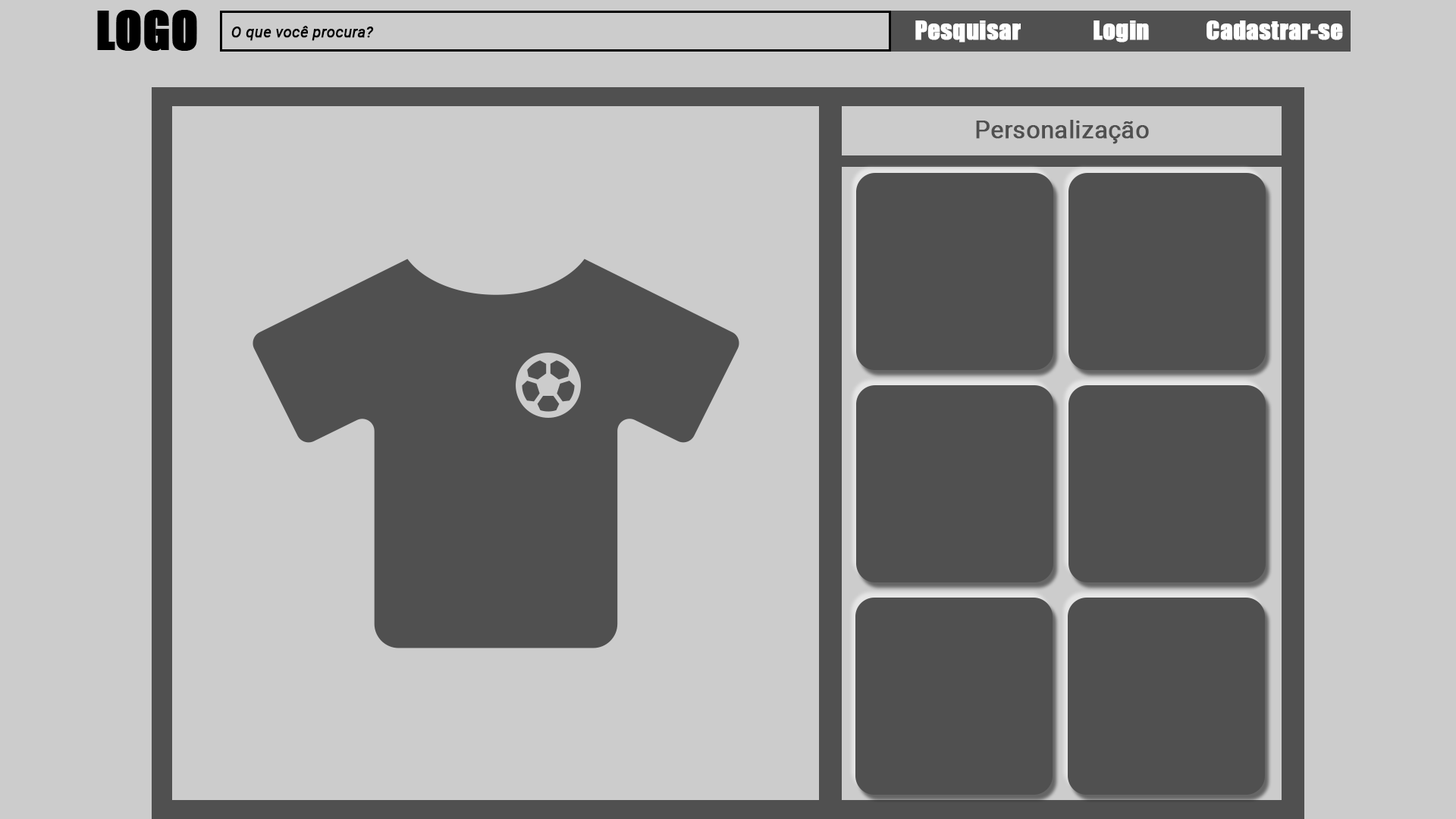
<style>
.page{position:relative;width:1456px;height:819px;background:#cccccc}
.page>*{position:absolute;margin:0}
.t1{font:15.2px "Roboto-Italic";color:#000000;font-weight:bold}
.t2{font:24.3px "Impact";color:#ffffff;font-weight:bold}
.t3{font:24.3px "Roboto-Regular";color:#505050;font-weight:bold}
</style>
<div class="page">
<p class="t1" style="left:231px;top:26px;width:143px;height:15px">O que você procura?</p>
<p class="t2" style="left:915px;top:20px;width:106px;height:22px">Pesquisar</p>
<p class="t2" style="left:1094px;top:20px;width:55px;height:22px">Login</p>
<p class="t2" style="left:1206px;top:20px;width:137px;height:20px">Cadastrar-se</p>
<p class="t3" style="left:976px;top:120px;width:173px;height:24px">Personalização</p>
</div>
